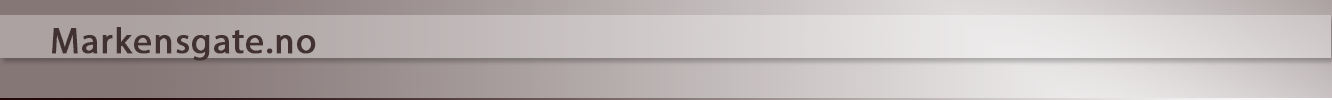
<style>
.page{position:relative;width:1332px;height:100px}
.page>*{position:absolute;margin:0}
.t1{font:36px "MyriadPro-Regular";letter-spacing:0.025em;color:#413131;font-weight:bold}
</style>
<div class="page">
<p class="t1" style="left:52px;top:27px;width:264px;height:34px">Markensgate.no</p>
</div>
